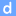
<style>
.page{position:relative;width:16px;height:16px;background:#6aa6ff}
.page>*{position:absolute;margin:0}
.t1{font:16.2px "UDDigiKyokashoNK";color:#ffffff}
</style>
<div class="page">
<p class="t1" style="left:3px;top:1px;width:9px;height:13px">d</p>
</div>
